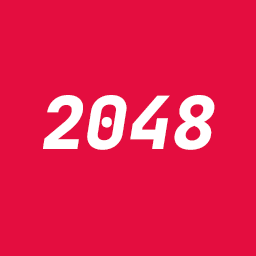
<style>
.page{position:relative;width:256px;height:256px;background:#e40d3f}
.page>*{position:absolute;margin:0}
.t1{font:72.9px "JetBrainsMono-ExtraBoldItalic";color:#ffffff}
</style>
<div class="page">
<p class="t1" style="left:43px;top:95px;width:172px;height:55px">2048</p>
</div>
